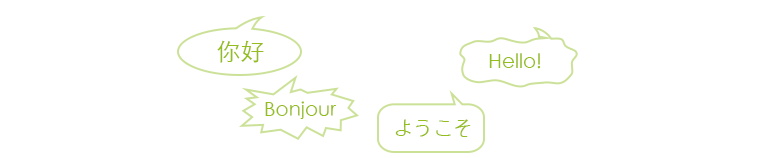
<style>
.page{position:relative;width:780px;height:158px;background:#ffffff}
.page>*{position:absolute;margin:0}
.t1{font:24px "STXihei";color:#93be1d}
.t2{font:20px "STXihei";color:#93be1d}
</style>
<div class="page">
<p class="t1" style="left:217px;top:40px;width:47px;height:23px">你好</p>
<p class="t2" style="left:489px;top:53px;width:52px;height:16px">Hello!</p>
<p class="t2" style="left:265px;top:101px;width:72px;height:18px">Bonjour</p>
<p class="t2" style="left:395px;top:119px;width:76px;height:18px">ようこそ</p>
</div>
